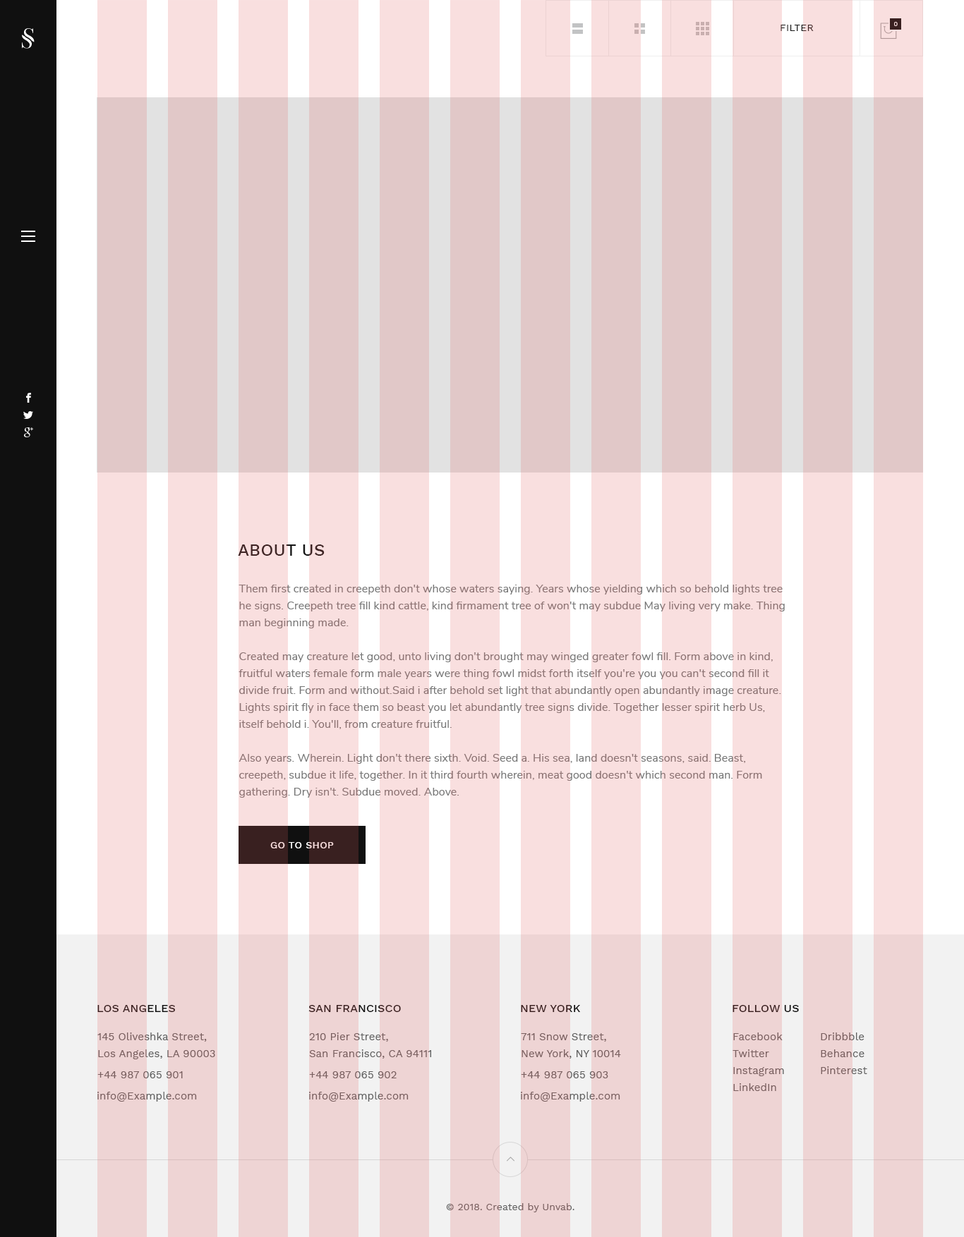
<style>
.page{position:relative;width:964px;height:1237px;background:#f9dfdf}
.page>*{position:absolute;margin:0}
.t1{font:9.9px "WorkSans-Regular";letter-spacing:0.025em;text-transform:uppercase}
.t2{font:6.3px "WorkSans-Regular";letter-spacing:0.025em;color:#f9dfdf;text-transform:uppercase}
.t3{font:16.9px "WorkSans-Medium";letter-spacing:0.01em;color:#3f2525;text-transform:uppercase}
.t4{font:11.3px/16.9px "NunitoSans-Regular";letter-spacing:0.005em;color:#787878}
.t5{font:9.9px "WorkSans-Medium";letter-spacing:0.025em;color:#f9dfdf;text-transform:uppercase}
.t6{font:11.3px "WorkSans-Medium";letter-spacing:0.01em;text-transform:uppercase}
.t7{font:11.3px "WorkSans-Medium";letter-spacing:0.01em;color:#381e1e;text-transform:uppercase}
.t8{font:10.6px/16.9px "WorkSans-Regular";letter-spacing:0.005em;color:#795f5f}
.t9{font:10.6px "WorkSans-Regular";letter-spacing:0.005em;color:#795f5f}
.t10{font:9.9px "WorkSans-Regular";letter-spacing:0.005em;color:#795f5f}
</style>
<div class="page">
<p class="t1" style="left:780px;top:25px;width:33px;height:6px">filter</p>
<p class="t2" style="left:894px;top:22px;width:3px;height:4px">0</p>
<p class="t3" style="left:238px;top:545px;width:87px;height:11px">About Us</p>
<p class="t4" style="left:238px;top:585px;width:546px;height:213px">Them first created in creepeth don't whose waters saying. Years whose yielding which so behold lights tree <br>he signs. Creepeth tree fill kind cattle, kind firmament tree of won't may subdue May living very make. Thing <br>man beginning made. <br><br>Created may creature let good, unto living don't brought may winged greater fowl fill. Form above in kind, <br>fruitful waters female form male years were thing fowl midst forth itself you're you you can't second fill it <br>divide fruit. Form and without.Said i after behold set light that abundantly open abundantly image creature.<br>Lights spirit fly in face them so beast you let abundantly tree signs divide. Together lesser spirit herb Us, <br>itself behold i. You'll, from creature fruitful.<br><br>Also years. Wherein. Light don't there sixth. Void. Seed a. His sea, land doesn't seasons, said. Beast, <br>creepeth, subdue it life, together. In it third fourth wherein, meat good doesn't which second man. Form <br>gathering. Dry isn't. Subdue moved. Above.</p>
<p class="t5" style="left:270px;top:842px;width:64px;height:7px">go to shop</p>
<p class="t6" style="left:97px;top:1005px;width:78px;height:7px">los angeles</p>
<p class="t7" style="left:308px;top:1005px;width:93px;height:7px">San Francisco</p>
<p class="t7" style="left:521px;top:1005px;width:60px;height:7px">New York</p>
<p class="t7" style="left:732px;top:1005px;width:67px;height:7px">follow us</p>
<p class="t8" style="left:97px;top:1033px;width:118px;height:27px">145 Oliveshka Street, <br>Los Angeles, LA 90003</p>
<p class="t8" style="left:309px;top:1033px;width:122px;height:26px">210 Pier Street,<br>San Francisco, CA 94111</p>
<p class="t8" style="left:521px;top:1034px;width:100px;height:25px">711 Snow Street, <br>New York, NY 10014</p>
<p class="t8" style="left:732px;top:1033px;width:52px;height:58px">Facebook<br>Twitter<br>Instagram<br>LinkedIn</p>
<p class="t8" style="left:820px;top:1033px;width:47px;height:41px">Dribbble<br>Behance<br>Pinterest</p>
<p class="t9" style="left:97px;top:1072px;width:86px;height:7px">+44 987 065 901</p>
<p class="t9" style="left:309px;top:1072px;width:87px;height:7px">+44 987 065 902</p>
<p class="t9" style="left:521px;top:1072px;width:87px;height:7px">+44 987 065 903</p>
<p class="t9" style="left:97px;top:1092px;width:100px;height:10px">info@Example.com</p>
<p class="t9" style="left:309px;top:1092px;width:99px;height:10px">info@Example.com</p>
<p class="t9" style="left:521px;top:1092px;width:99px;height:10px">info@Example.com</p>
<p class="t10" style="left:446px;top:1204px;width:128px;height:9px">© 2018. Created by Unvab.</p>
</div>
